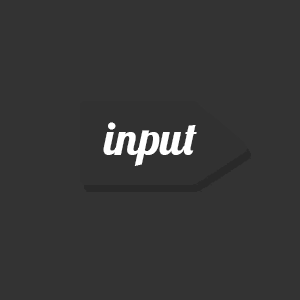
<style>
.page{position:relative;width:300px;height:300px;background:#333333}
.page>*{position:absolute;margin:0}
.t1{font:45.8px "Lobster-Regular";color:#ffffff}
</style>
<div class="page">
<p class="t1" style="left:103px;top:122px;width:94px;height:44px">input</p>
</div>
